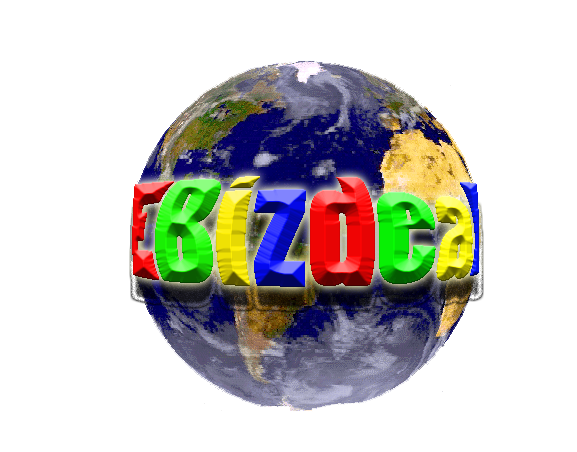
<style>
.page{position:relative;width:577px;height:452px;background:#ffffff}
.page>*{position:absolute;margin:0}
.t1{font:116.9px "PoplarStd";scale:1.09 1}
</style>
<div class="page">
<p class="t1" style="left:132px;top:176px;width:347px;height:111px">EBizdeal</p>
</div>
